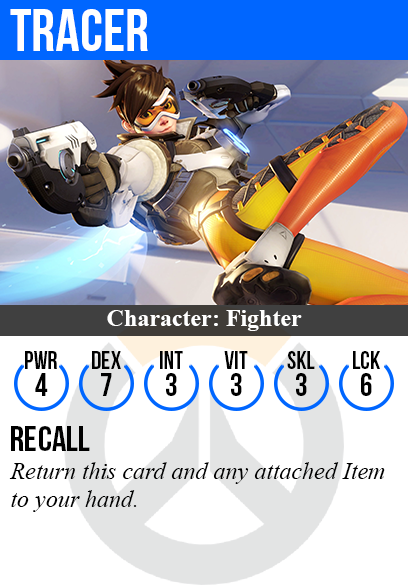
<style>
.page{position:relative;width:408px;height:585px;background:#ffffff}
.page>*{position:absolute;margin:0}
.t1{font:60px "BebasNeue";color:#ffffff}
.t2{font:24px "TimesNewRomanPS-BoldMT";color:#ffffff}
.t3{font:25px "BebasNeue";color:#000000}
.t4{font:32px "BebasNeue";color:#000000}
.t5{font:36px "BebasNeue";color:#000000}
.t6{font:24px "TimesNewRomanPS-ItalicMT";color:#000000}
</style>
<div class="page">
<p class="t1" style="left:10px;top:9px;width:138px;height:42px">tracer</p>
<p class="t2" style="left:107px;top:310px;width:195px;height:21px">Character: Fighter</p>
<p class="t3" style="left:25px;top:351px;width:32px;height:18px">PWR</p>
<p class="t3" style="left:92px;top:351px;width:29px;height:18px">dex</p>
<p class="t3" style="left:160px;top:351px;width:23px;height:18px">int</p>
<p class="t3" style="left:224px;top:351px;width:24px;height:18px">vit</p>
<p class="t3" style="left:287px;top:351px;width:28px;height:18px">skl</p>
<p class="t3" style="left:353px;top:351px;width:27px;height:18px">lck</p>
<p class="t4" style="left:35px;top:373px;width:13px;height:23px">4</p>
<p class="t4" style="left:101px;top:373px;width:11px;height:23px">7</p>
<p class="t4" style="left:166px;top:373px;width:11px;height:23px">3</p>
<p class="t4" style="left:231px;top:373px;width:11px;height:23px">3</p>
<p class="t4" style="left:296px;top:373px;width:11px;height:23px">3</p>
<p class="t4" style="left:361px;top:373px;width:11px;height:23px">6</p>
<p class="t5" style="left:11px;top:426px;width:79px;height:25px">recall</p>
<p class="t6" style="left:9px;top:462px;width:376px;height:50px">Return this card and any attached Item<br>to your hand.</p>
</div>
